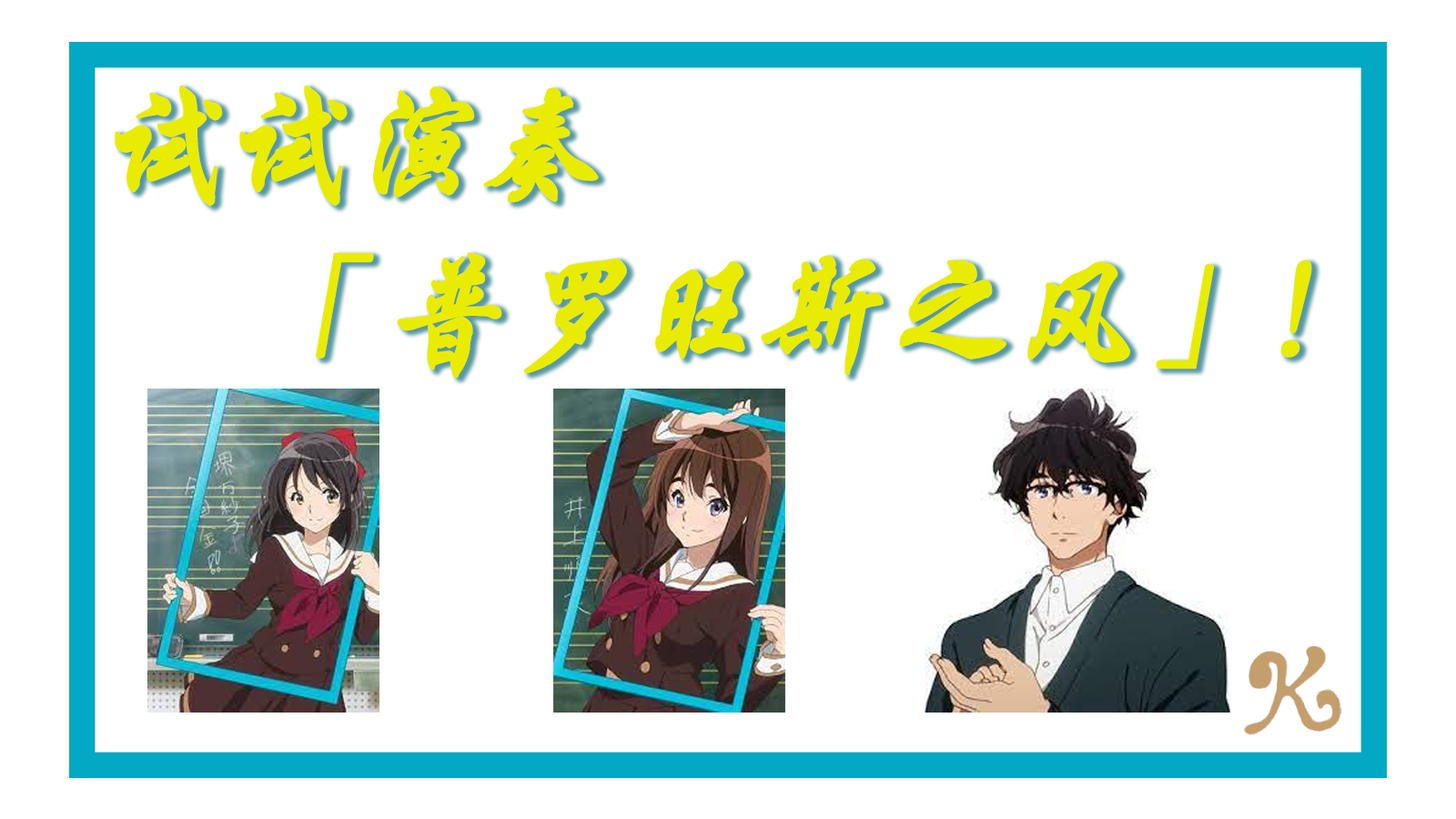
<style>
.page{position:relative;width:1456px;height:819px;background:#ffffff}
.page>*{position:absolute;margin:0}
.t1{font:121.3px/166.8px "HGXK_CNKI";color:#e9ec00;font-weight:bold;font-style:italic}
</style>
<div class="page">
<p class="t1" style="left:115px;top:85px;width:1197px;height:293px">试试演奏<br>    「普罗旺斯之风」！</p>
</div>
